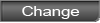
<style>
.page{position:relative;width:100px;height:23px}
.page>*{position:absolute;margin:0}
.t1{font:13.2px "ArialMT";color:#ffffff;scale:1.25 1}
</style>
<div class="page">
<p class="t1" style="left:22px;top:6px;width:58px;height:13px">Change</p>
</div>
